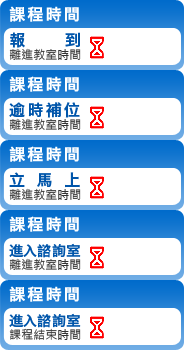
<style>
.page{position:relative;width:184px;height:350px;background:#ffffff}
.page>*{position:absolute;margin:0}
.t1{font:16px "HiraginoSansGB-W6";letter-spacing:0.14em;color:#ffffff}
.t2{font:16px "HiraginoSansGB-W6";letter-spacing:0.14em;color:#0055aa}
.t3{font:12px "MicrosoftJhengHeiRegular";color:#333333}
.t4{font:16px "HiraginoSansGB-W6";letter-spacing:0.72em;color:#0055aa}
.t5{font:14px "HiraginoSansGB-W6";letter-spacing:0.02em;color:#0055aa}
</style>
<div class="page">
<p class="t1" style="left:9px;top:6px;width:70px;height:16px">課程時間</p>
<p class="t2" style="left:10px;top:32px;width:70px;height:16px">報     到</p>
<p class="t3" style="left:9px;top:48px;width:72px;height:12px">離進教室時間</p>
<p class="t1" style="left:9px;top:76px;width:70px;height:16px">課程時間</p>
<p class="t2" style="left:9px;top:102px;width:71px;height:16px">逾時補位</p>
<p class="t3" style="left:9px;top:118px;width:72px;height:12px">離進教室時間</p>
<p class="t1" style="left:9px;top:146px;width:70px;height:16px">課程時間</p>
<p class="t4" style="left:9px;top:172px;width:71px;height:16px">立馬上</p>
<p class="t3" style="left:9px;top:188px;width:72px;height:12px">離進教室時間</p>
<p class="t1" style="left:9px;top:216px;width:70px;height:16px">課程時間</p>
<p class="t5" style="left:9px;top:243px;width:72px;height:15px">進入諮詢室</p>
<p class="t3" style="left:9px;top:258px;width:72px;height:12px">離進教室時間</p>
<p class="t1" style="left:9px;top:286px;width:70px;height:16px">課程時間</p>
<p class="t5" style="left:9px;top:313px;width:72px;height:15px">進入諮詢室</p>
<p class="t3" style="left:9px;top:328px;width:72px;height:12px">課程結束時間</p>
</div>
